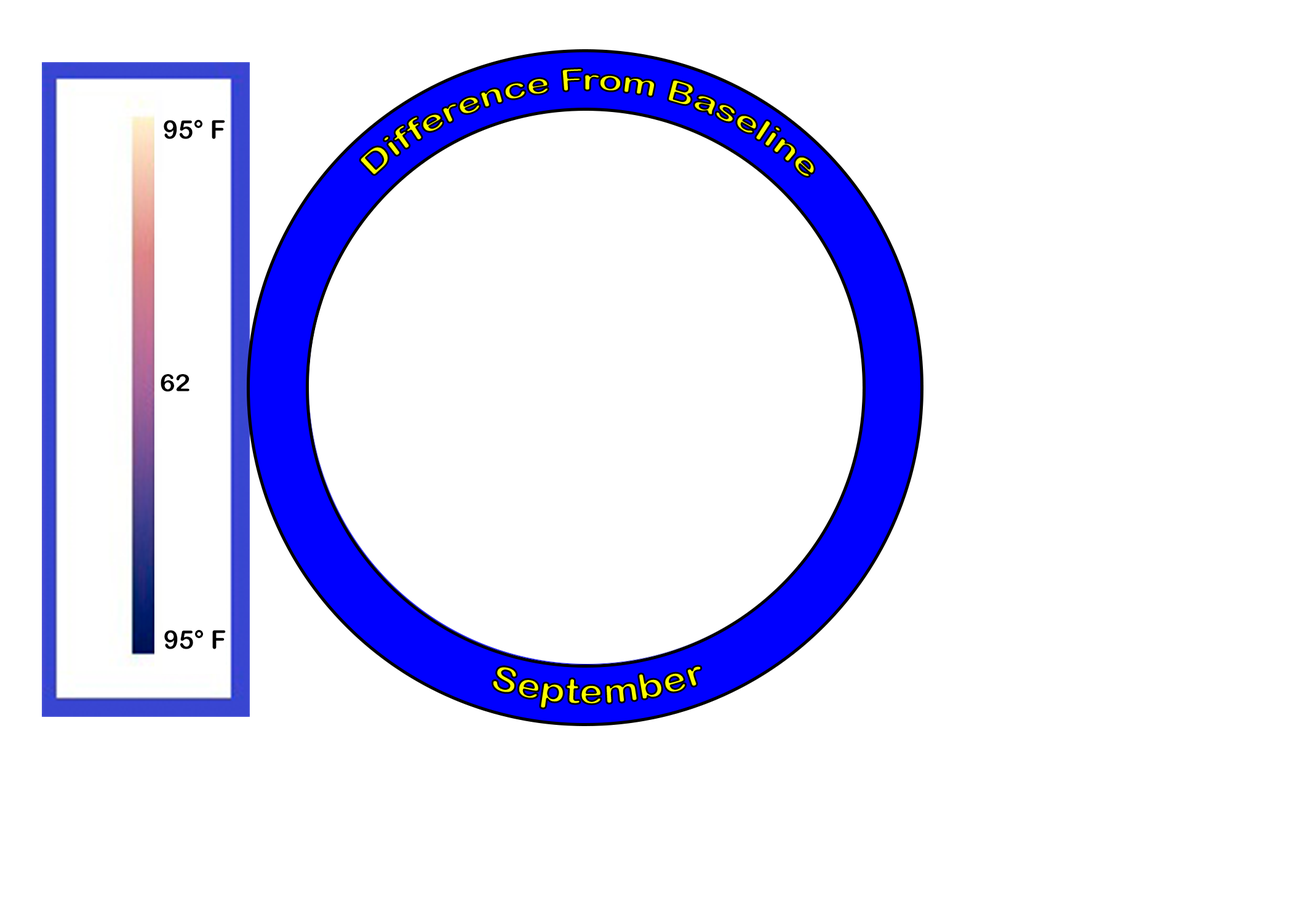
<style>
.page{position:relative;width:1292px;height:923px;background:#ffffff}
.page>*{position:absolute;margin:0}
.t1{font:30.8px "ArialRoundedMTBold"}
.t2{font:25.6px "ArialRoundedMTBold";color:#000000}
.t3{font:23.7px "ArialRoundedMTBold";color:#000000;scale:1.08 1}
.t4{font:35.9px "ArialRoundedMTBold"}
</style>
<div class="page">
<p class="t1" style="left:360px;top:68px;width:455px;height:109px;text-align:center">Difference From Baseline</p>
<p class="t2" style="left:164px;top:119px;width:61px;height:20px">95° F</p>
<p class="t3" style="left:161px;top:374px;width:29px;height:18px">62</p>
<p class="t2" style="left:164px;top:629px;width:62px;height:20px">95° F</p>
<p class="t4" style="left:492px;top:666px;width:209px;height:43px;rotate:-2deg">September</p>
</div>
